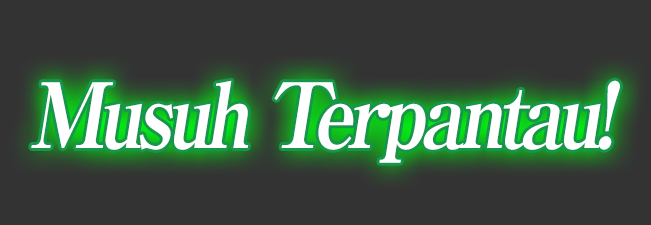
<style>
.page{position:relative;width:651px;height:225px;background:#333333}
.page>*{position:absolute;margin:0}
.t1{font:90px "RyuminPro-ExBold";letter-spacing:-0.08em;color:#ffffff;font-style:italic;scale:0.9 1}
</style>
<div class="page">
<p class="t1" style="left:31px;top:80px;width:589px;height:83px">Musuh Terpantau!</p>
<p class="t1" style="left:31px;top:80px;width:589px;height:83px">Musuh Terpantau!</p>
</div>
